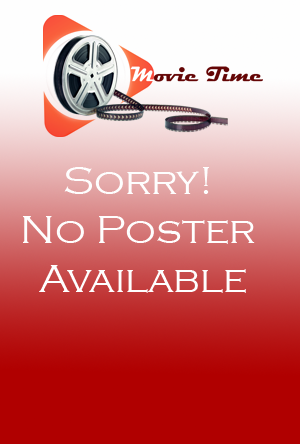
<style>
.page{position:relative;width:300px;height:444px}
.page>*{position:absolute;margin:0}
.t1{font:41px "CopperplateGothic-Light";color:#fefefe}
</style>
<div class="page">
<p class="t1" style="left:23px;top:167px;width:232px;height:126px;text-align:center">Sorry!<br>No Poster<br> Available</p>
</div>
